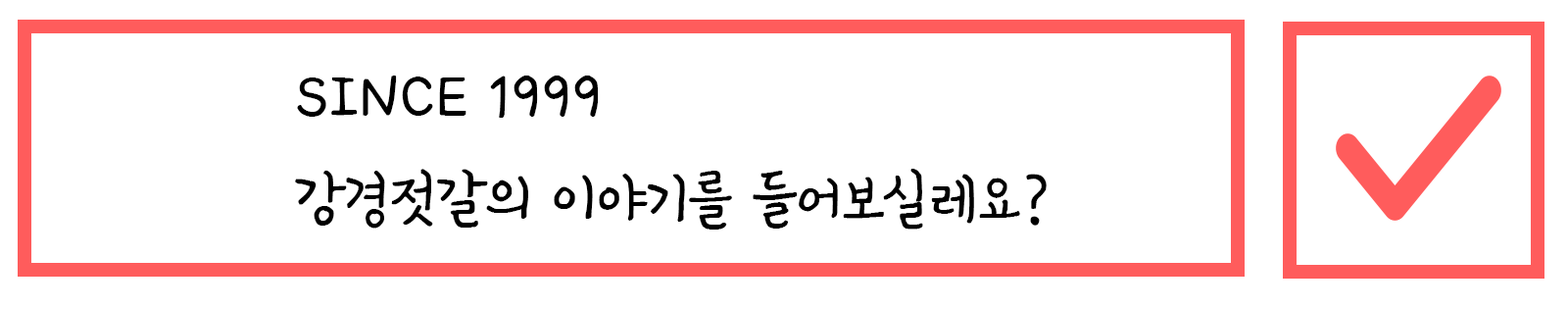
<style>
.page{position:relative;width:1568px;height:309px;background:#ffffff}
.page>*{position:absolute;margin:0}
.t1{font:58.8px "KCC-Chassam";color:#000000}
</style>
<div class="page">
<p class="t1" style="left:295px;top:75px;width:752px;height:154px">SINCE 1999<br>강경젓갈의 이야기를 들어보실레요?</p>
</div>
